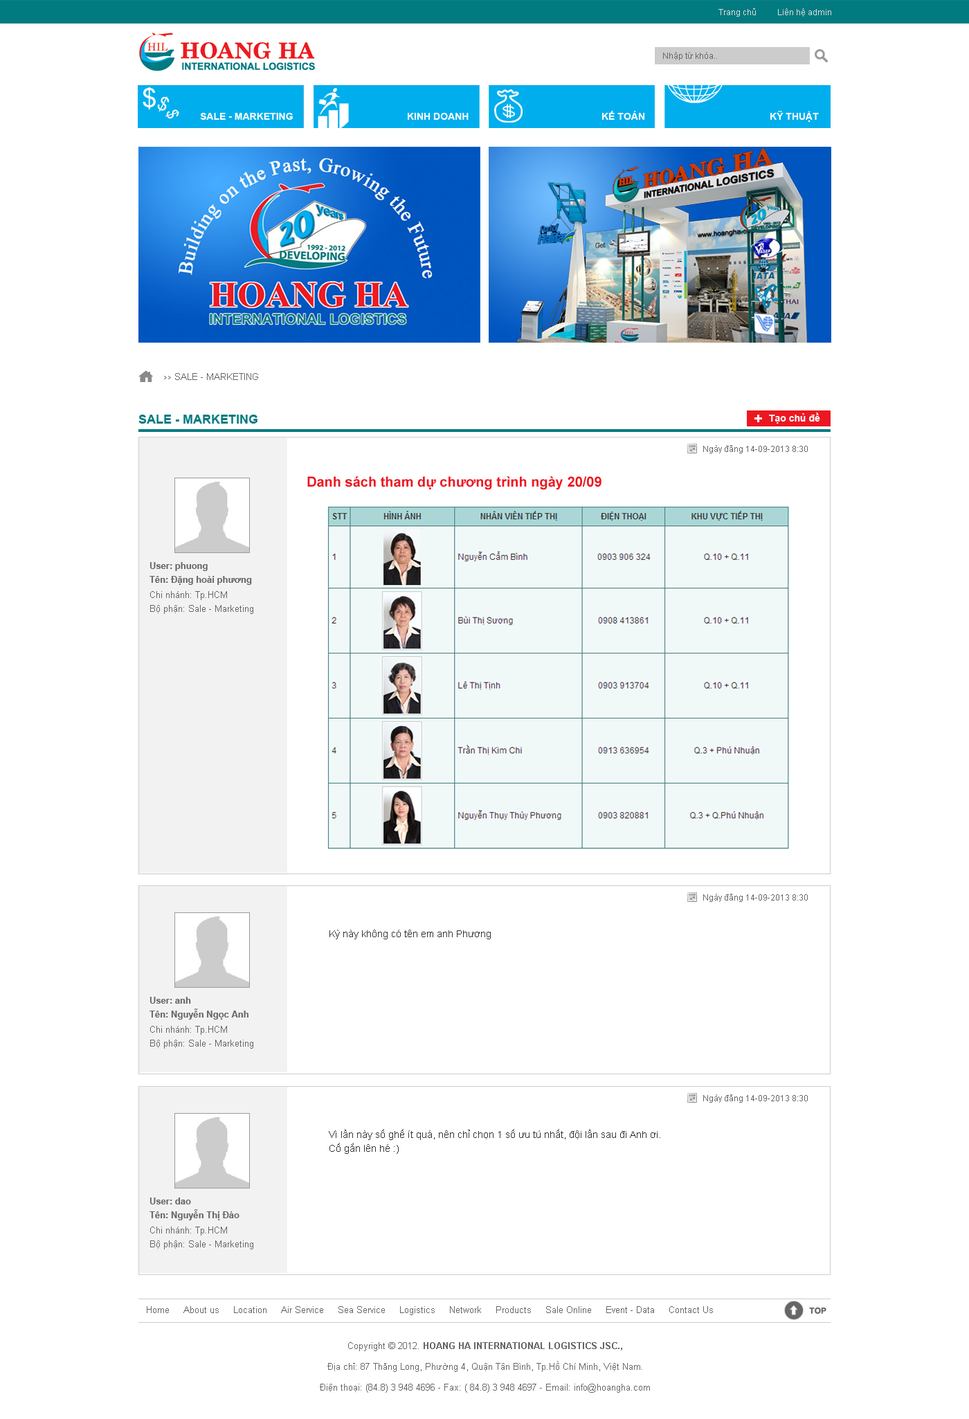
<style>
.page{position:relative;width:969px;height:1419px;background:#ffffff}
.page>*{position:absolute;margin:0}
.t1{font:8.3px "ArialMT";color:#dddddd}
.t2{font:8.3px "ArialMT";color:#666666}
.t3{font:9.7px "Arial-BoldMT";color:#ffffff}
.t4{font:9px "ArialMT";color:#666666}
.t5{font:6.9px "ArialMT";color:#666666}
.t6{font:9.7px "Arial-BoldMT";color:#fefefe}
.t7{font:12.5px "Arial-BoldMT";color:#017b80}
.t8{font:16.6px "Arial-BoldMT";color:#fefefe}
.t9{font:13.8px "Arial-BoldMT";color:#ed1721}
.t10{font:9px/13.8px "Arial-BoldMT";color:#666666}
.t11{font:9px/13.8px "ArialMT";color:#666666}
.t12{font:9.7px "ArialMT";color:#333333}
.t13{font:9.7px/13.8px "ArialMT";color:#333333}
</style>
<div class="page">
<p class="t1" style="left:719px;top:8px;width:112px;height:9px">Trang chủ          Liên hệ admin</p>
<p class="t2" style="left:663px;top:52px;width:54px;height:8px">Nhập từ khóa..</p>
<p class="t3" style="left:200px;top:113px;width:93px;height:7px">SALE - MARKETING</p>
<p class="t3" style="left:408px;top:113px;width:61px;height:7px">KINH DOANH</p>
<p class="t3" style="left:602px;top:111px;width:43px;height:9px">KẾ TOÁN</p>
<p class="t3" style="left:771px;top:111px;width:48px;height:11px">KỸ THUẬT</p>
<p class="t4" style="left:164px;top:373px;width:94px;height:7px"><span class="t5">&gt;&gt;</span> SALE - MARKETING</p>
<p class="t6" style="left:769px;top:413px;width:51px;height:11px">Tạo chủ đề</p>
<p class="t7" style="left:138px;top:415px;width:120px;height:9px">SALE - MARKETING</p>
<p class="t8" style="left:755px;top:415px;width:7px;height:7px">+</p>
<p class="t2" style="left:703px;top:445px;width:105px;height:8px">Ngày đăng 14-09-2013 8:30</p>
<p class="t9" style="left:307px;top:476px;width:295px;height:14px">Danh sách tham dự chương trình ngày 20/09</p>
<p class="t10" style="left:150px;top:562px;width:102px;height:23px">User: phuong<br>Tên: Đặng hoài phương</p>
<p class="t11" style="left:150px;top:591px;width:103px;height:23px">Chi nhánh: Tp.HCM<br>Bộ phận: Sale - Marketing</p>
<p class="t2" style="left:703px;top:894px;width:105px;height:8px">Ngày đăng 14-09-2013 8:30</p>
<p class="t12" style="left:330px;top:930px;width:161px;height:9px">Kỳ này không có tên em anh Phương</p>
<p class="t10" style="left:150px;top:997px;width:99px;height:23px">User: anh<br>Tên: Nguyễn Ngọc Anh</p>
<p class="t11" style="left:150px;top:1026px;width:103px;height:23px">Chi nhánh: Tp.HCM<br>Bộ phận: Sale - Marketing</p>
<p class="t2" style="left:703px;top:1095px;width:105px;height:8px">Ngày đăng 14-09-2013 8:30</p>
<p class="t13" style="left:329px;top:1129px;width:331px;height:25px">Vì lần này số ghế ít quá, nên chỉ chọn 1 số ưu tú nhất, đội lần sau đi Anh ơi.<br>Cố gắn lên hé :)</p>
<p class="t10" style="left:150px;top:1198px;width:90px;height:23px">User: dao<br>Tên: Nguyễn Thị Đào</p>
<p class="t11" style="left:150px;top:1227px;width:103px;height:23px">Chi nhánh: Tp.HCM<br>Bộ phận: Sale - Marketing</p>
<p class="t4" style="left:147px;top:1306px;width:566px;height:9px">Home     About us     Location     Air Service     Sea Service     Logistics     Network     Products     Sale Online     Event - Data     Contact Us</p>
<p class="t11" style="left:320px;top:1342px;width:330px;height:51px;text-align:center">Copyright © 2012. <span class="t10">HOANG HA INTERNATIONAL LOGISTICS JSC.,<br></span>Địa chỉ: 87 Thăng Long, Phường 4, Quận Tân Bình, Tp.Hồ Chí Minh, Việt Nam.<br>Điện thoại: (84.8) 3 948 4696 - Fax: ( 84.8) 3 948 4697 - Email: info@hoangha.com</p>
</div>
